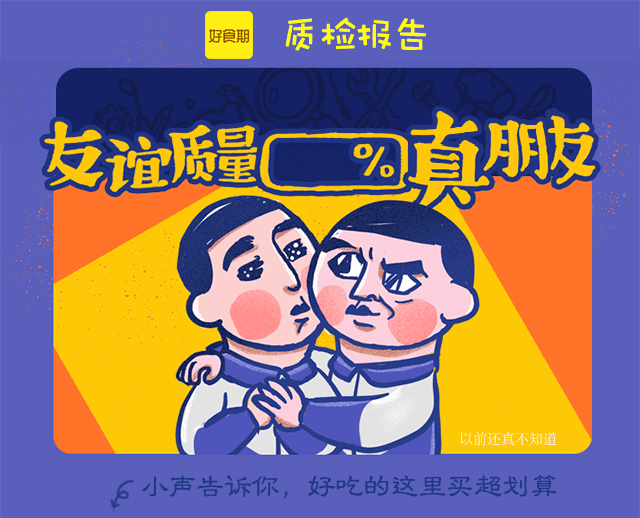
<style>
.page{position:relative;width:640px;height:518px;background:#595fbb}
.page>*{position:absolute;margin:0}
.t1{font:40px "DFWaWaSC-W5";letter-spacing:-0.1em;color:#ffff00;font-weight:bold}
.t2{font:14px "STSongti-SC-Light"}
.t3{font:30px "STLibianSC-Regular";letter-spacing:-0.1em;color:#1e3881;font-weight:bold}
</style>
<div class="page">
<p class="t1" style="left:285px;top:17px;width:141px;height:34px">质检报告</p>
<p class="t2" style="left:460px;top:432px;width:97px;height:14px">以前还真不知道</p>
<p class="t3" style="left:142px;top:475px;width:415px;height:24px">小声告诉你，好吃的这里买超划算</p>
</div>
